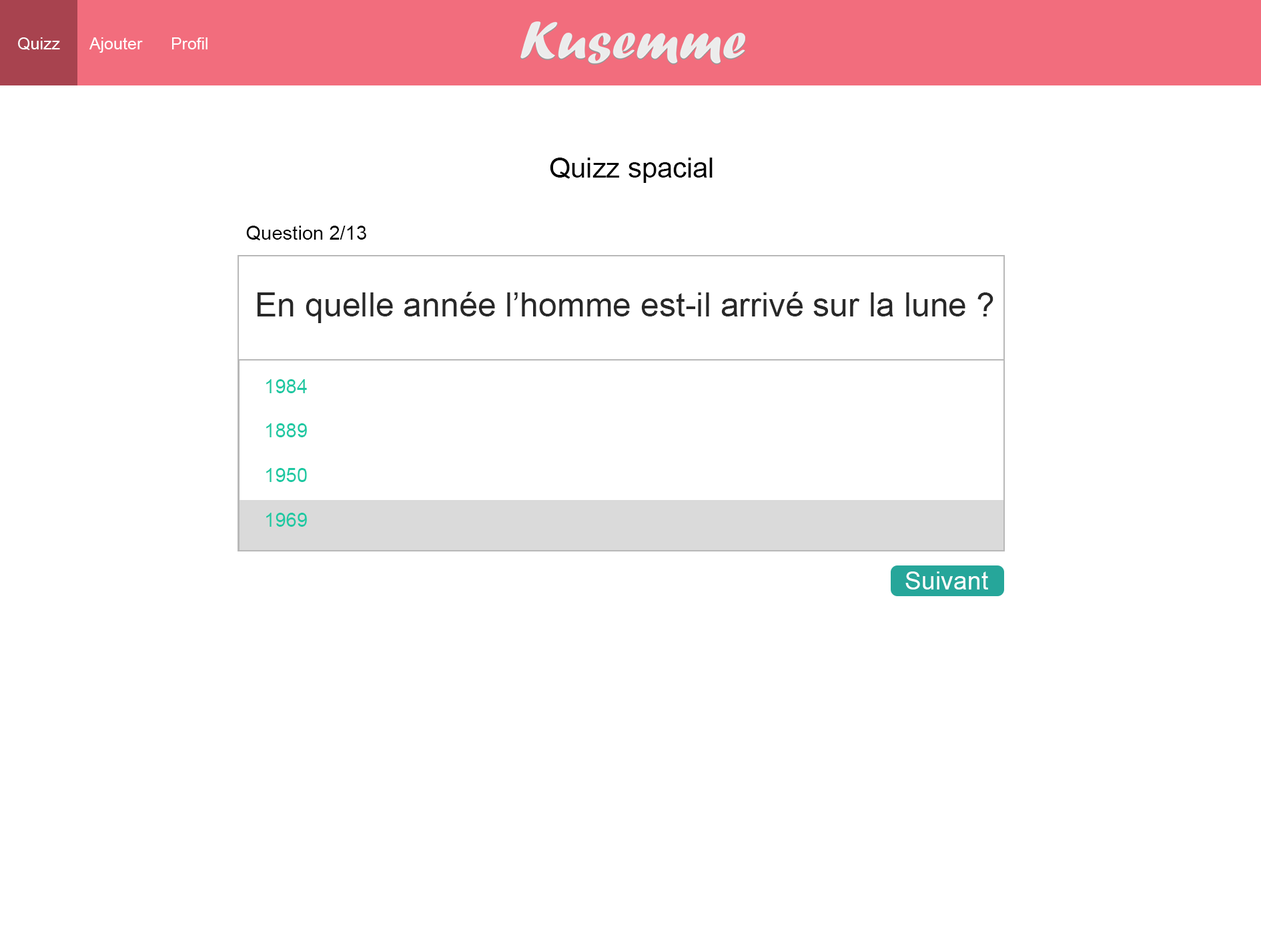
<style>
.page{position:relative;width:1261px;height:946px;background:#ffffff}
.page>*{position:absolute;margin:0}
.t1{font:16.8px "ArialMT";color:#ffffff}
.t2{font:28.1px "ArialMT";color:#000000}
.t3{font:19.7px "ArialMT";color:#000000}
.t4{font:33.7px "ArialMT";color:#282828}
.t5{font:19.7px/44.5px "ArialMT";color:#1dc8a2}
.t6{font:25.3px "ArialMT";color:#ffffff}
</style>
<div class="page">
<p class="t1" style="left:18px;top:37px;width:190px;height:16px">Quizz  Ajouter   Profil</p>
<p class="t2" style="left:550px;top:157px;width:163px;height:26px">Quizz spacial</p>
<p class="t3" style="left:246px;top:226px;width:120px;height:14px">Question 2/13</p>
<p class="t4" style="left:257px;top:292px;width:737px;height:31px">En quelle année l’homme est-il arrivé sur la lune ?</p>
<p class="t5" style="left:266px;top:379px;width:41px;height:147px">1984<br>1889<br>1950<br>1969</p>
<p class="t6" style="left:905px;top:571px;width:83px;height:18px">Suivant</p>
</div>
